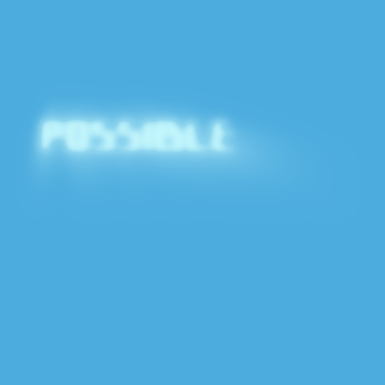
<style>
.page{position:relative;width:385px;height:385px;background:#4dacde}
.page>*{position:absolute;margin:0}
.t1{font:39.8px "Starcadia";color:#b7eff9;font-weight:bold}
</style>
<div class="page">
<p class="t1" style="left:42px;top:120px;width:191px;height:31px">POSSIBLE</p>
</div>
